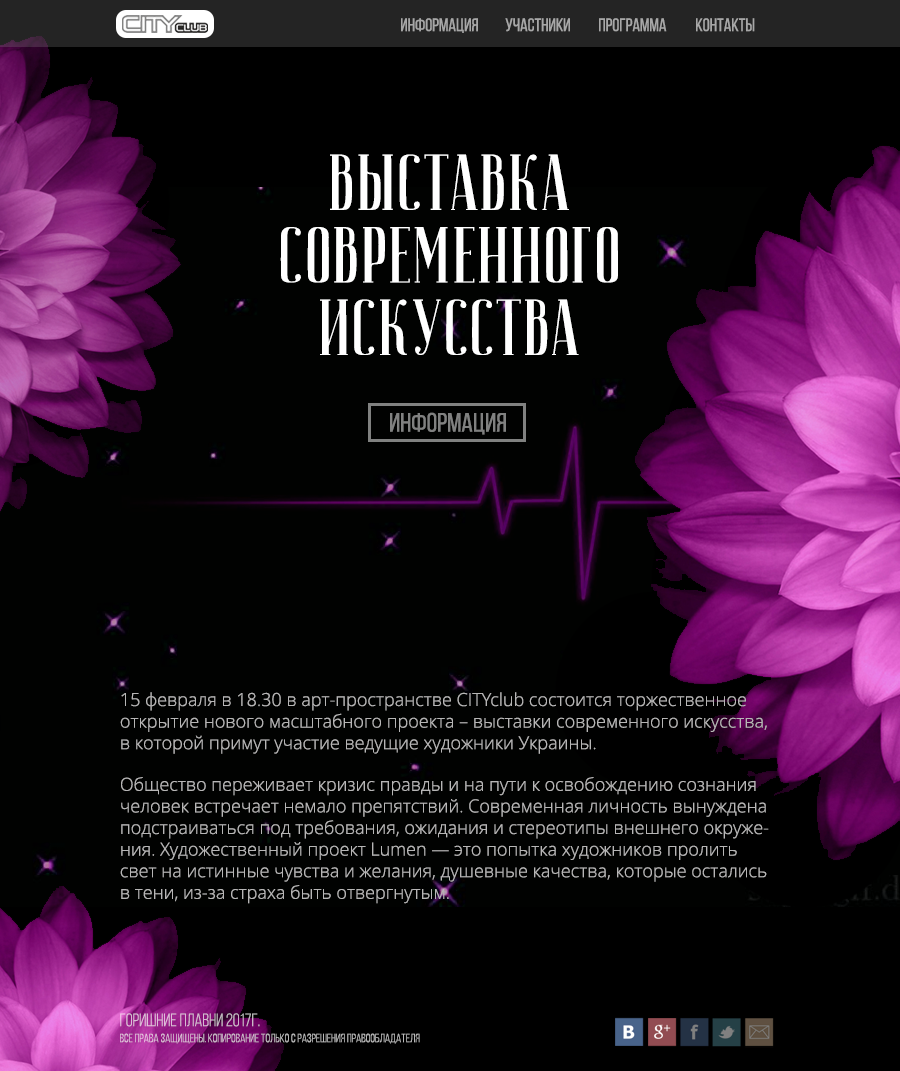
<style>
.page{position:relative;width:900px;height:1071px;background:#010201}
.page>*{position:absolute;margin:0}
.t1{font:18px "BebasNeueRegular";color:#a7a7a7}
.t2{font:79.1px "JOURNALISM";color:#ffffff}
.t3{font:26.7px "BebasNeueRegular";color:#808180}
.t4{font:18px "OpenSans-Light";color:#b7b6b6}
.t5{font:18px "BebasNeueBook";color:#d8bbd3}
.t6{font:12px "BebasNeueBook";color:#b8b8b8}
</style>
<div class="page">
<p class="t1" style="left:401px;top:18px;width:77px;height:15px">информация</p>
<p class="t1" style="left:505px;top:18px;width:65px;height:14px">участники</p>
<p class="t1" style="left:599px;top:18px;width:68px;height:14px">программа</p>
<p class="t1" style="left:696px;top:18px;width:59px;height:14px">контакты</p>
<p class="t2" style="left:330px;top:154px;width:239px;height:56px">выставка</p>
<p class="t2" style="left:280px;top:227px;width:338px;height:56px">современного</p>
<p class="t2" style="left:320px;top:299px;width:259px;height:56px">искусства</p>
<p class="t3" style="left:390px;top:412px;width:116px;height:23px">информация</p>
<p class="t4" style="left:120px;top:692px;width:649px;height:212px">15 февраля в 18.30 в арт-пространстве CITYclub состоится торжественное открытие нового масштабного проекта – выставки современного искусства, в которой примут участие ведущие художники Украины. <br>Общество переживает кризис правды и на пути к освобождению сознания человек встречает немало препятствий. Современная личность вынуждена подстраиваться под требования, ожидания и стереотипы внешнего окружения. Художественный проект Lumen — это попытка художников пролить свет на истинные чувства и желания, душевные качества, которые остались в тени, из-за страха быть отвергнутым.</p>
<p class="t5" style="left:120px;top:1013px;width:140px;height:14px">горишние плавни 2017г.</p>
<p class="t6" style="left:120px;top:1033px;width:300px;height:11px">все права защищены. копирование только с разрешения правообладателя</p>
</div>
